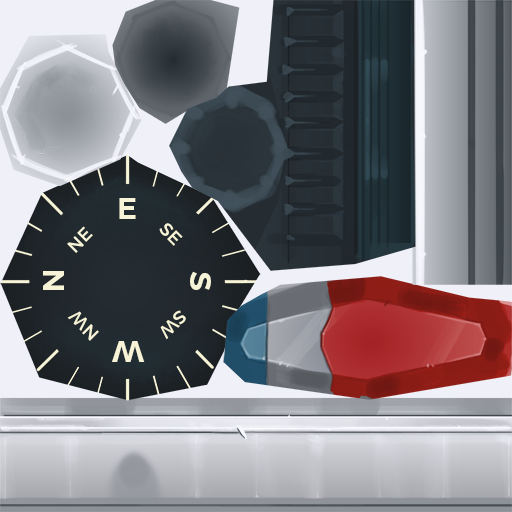
<style>
.page{position:relative;width:512px;height:512px}
.page>*{position:absolute;margin:0}
.t1{font:30px "Montserrat-SemiBold";letter-spacing:0.02em;color:#f7f3d7}
.t2{font:18px "Montserrat-Regular";letter-spacing:0.02em;color:#f7f3d7}
.t3{font:30.1px "Montserrat-SemiBold";letter-spacing:0.02em;color:#f7f3d7}
</style>
<div class="page">
<p class="t1" style="left:119px;top:198px;width:17px;height:21px">E</p>
<p class="t2" style="left:67px;top:226px;width:26px;height:27px;rotate:-45deg">NE</p>
<p class="t2" style="left:159px;top:223px;width:24px;height:23px;rotate:45deg">SE</p>
<p class="t3" style="left:43px;top:271px;width:21px;height:19px;rotate:-90deg">N</p>
<p class="t3" style="left:190px;top:271px;width:21px;height:19px;rotate:90deg">S</p>
<p class="t2" style="left:67px;top:311px;width:32px;height:30px;rotate:-135deg">NW</p>
<p class="t2" style="left:160px;top:310px;width:26px;height:30px;rotate:135deg">SW</p>
<p class="t3" style="left:112px;top:341px;width:33px;height:21px">W</p>
</div>
